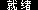
<style>
.page{position:relative;width:38px;height:10px;background:#000000}
.page>*{position:absolute;margin:0}
.t1{font:11px "PMingLiU";color:#fcfcfc}
</style>
<div class="page">
<p class="t1" style="left:7px;top:0px;width:24px;height:10px">就 绪</p>
</div>
